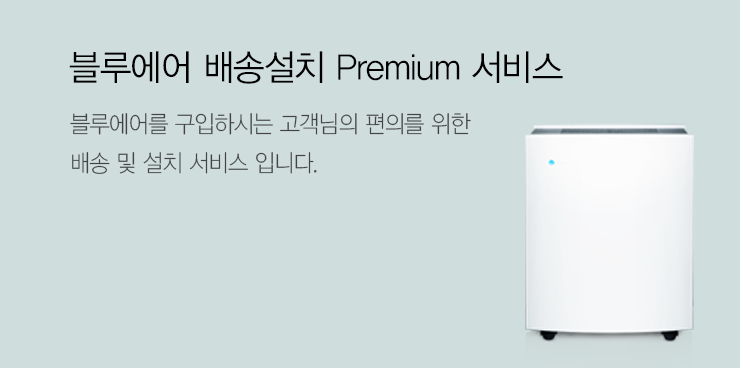
<style>
.page{position:relative;width:740px;height:368px;background:#cfdddc}
.page>*{position:absolute;margin:0}
.t1{font:36px "YDVYGO32";letter-spacing:-0.025em;color:#000000;scale:0.95 1}
.t2{font:24px/22px "YDVYGO31";letter-spacing:-0.025em;color:#444444;scale:0.91 1}
.t3{font:24px/39px "YDVYGO31";letter-spacing:-0.025em;color:#444444;scale:0.91 1}
</style>
<div class="page">
<p class="t1" style="left:69px;top:51px;width:494px;height:33px">블루에어 배송설치 Premium 서비스</p>
<p class="t2" style="left:70px;top:113px;width:401px;height:61px">블루에어를 구입하시는 고객님의 편의를 위한<br><span class="t3">배송 및 설치 서비스 입니다.</span></p>
</div>
